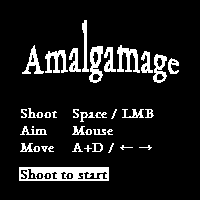
<style>
.page{position:relative;width:200px;height:200px;background:#000000}
.page>*{position:absolute;margin:0}
.t1{font:14px "EBGaramond";color:#ffffff;font-weight:bold}
.t2{font:14px "EBGaramond";color:#000000;font-weight:bold}
</style>
<div class="page">
<p class="t1" style="left:20px;top:108px;width:37px;height:44px">Shoot<br>Aim<br>Move</p>
<p class="t1" style="left:72px;top:109px;width:82px;height:44px">Space / LMB<br>Mouse<br>A+D / ← →</p>
<p class="t2" style="left:21px;top:169px;width:86px;height:10px">Shoot to start</p>
</div>
